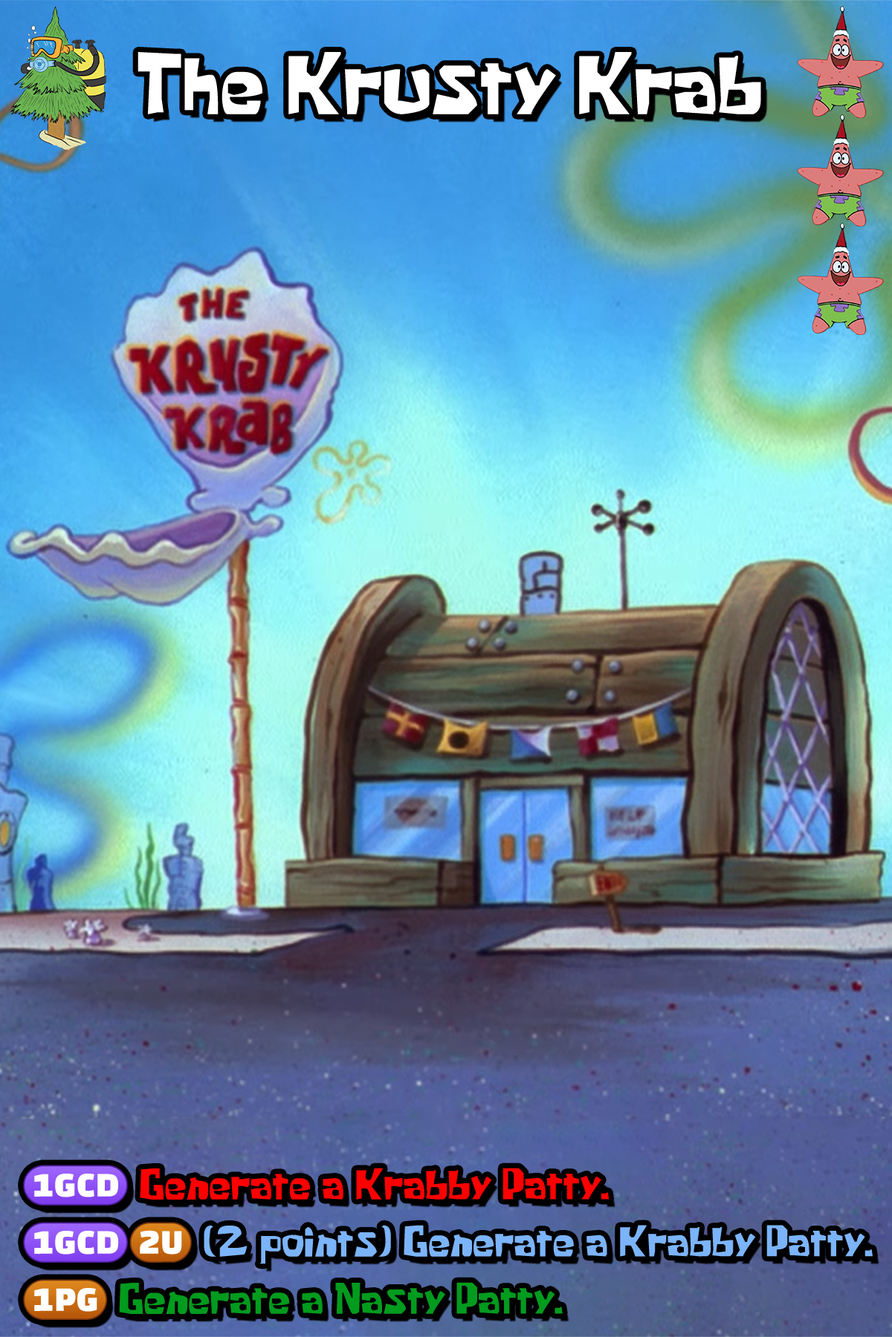
<style>
.page{position:relative;width:892px;height:1337px}
.page>*{position:absolute;margin:0}
.t1{font:141.9px "KrabbyPatty";color:#ffffff}
.t2{font:70.7px/57.2px "KrabbyPatty"}
.t3{font:70.7px/57.2px "stoogedings-Regular"}
.t4{font:70.7px/57.2px "stoogedings-Regular";letter-spacing:0.278em}
</style>
<div class="page">
<p class="t1" style="left:137px;top:52px;width:624px;height:62px">The Krusty Krab</p>
<p class="t2" style="left:23px;top:1165px;width:849px;height:155px"><span class="t3">(1GCD)</span> Generate a Krabby Patty.<br><span class="t3">(1GCD)</span><span class="t4">(2U)</span>(2 points) Generate a Krabby Patty.<br><span class="t3">(1PG)</span> Generate a Nasty Patty.</p>
</div>
